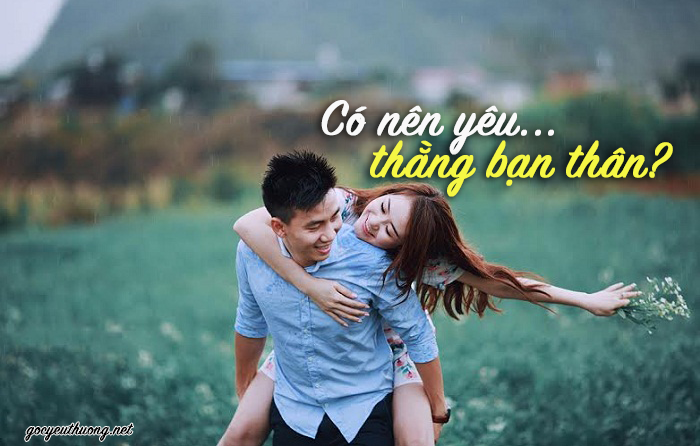
<style>
.page{position:relative;width:700px;height:446px}
.page>*{position:absolute;margin:0}
.t1{font:53.8px "SignPainter-HouseScript";color:#f9f9f9;font-weight:bold}
.t2{font:53.8px "SignPainter-HouseScript";color:#f5f744;font-weight:bold}
.t3{font:18px "SignPainter-HouseScript";color:#000000;font-weight:bold}
</style>
<div class="page">
<p class="t1" style="left:321px;top:100px;width:233px;height:55px">Có nên yêu...</p>
<p class="t2" style="left:370px;top:140px;width:303px;height:57px">thằng bạn thân?</p>
<p class="t3" style="left:25px;top:422px;width:108px;height:19px">gocyeuthuong.net</p>
</div>
